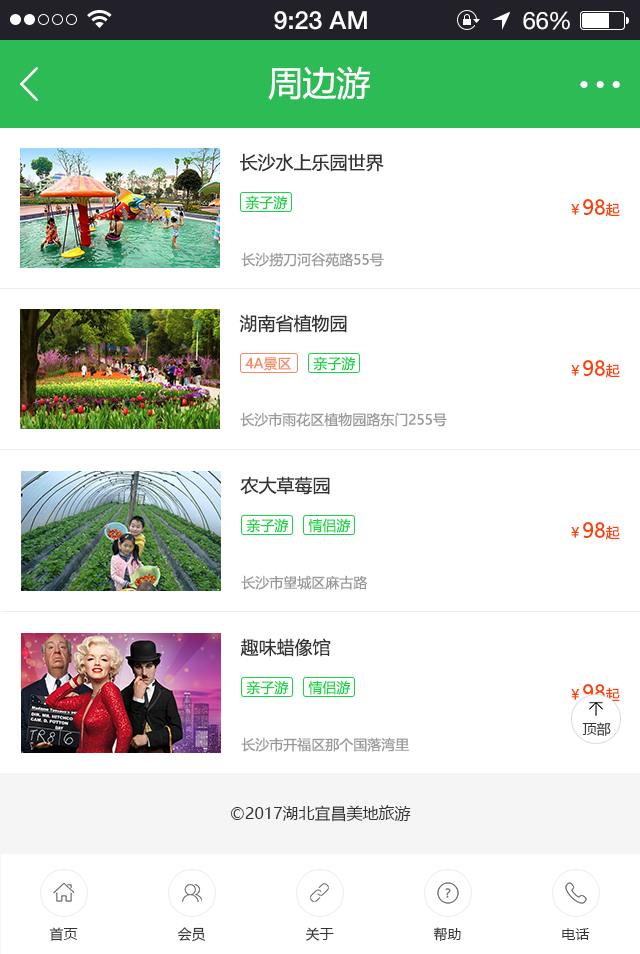
<style>
.page{position:relative;width:640px;height:954px;background:#ffffff}
.page>*{position:absolute;margin:0}
.t1{font:25px "HelveticaNeue-Medium";color:#ffffff}
.t2{font:24px "HelveticaNeue";color:#ffffff}
.t3{font:24px "HelveticaNeue";letter-spacing:-0.02em;color:#ffffff}
.t4{font:34px "MicrosoftYaHei";color:#ffffff}
.t5{font:18px "MicrosoftYaHei";color:#333333}
.t6{font:14px "MicrosoftYaHei";color:#19d349}
.t7{font:20px "MicrosoftYaHei";color:#f94307}
.t8{font:14px "MicrosoftYaHei";color:#f94307}
.t9{font:14px "MicrosoftYaHei";color:#999999}
.t10{font:14px "MicrosoftYaHei";color:#fb8963}
.t11{font:14px "MicrosoftYaHei";color:#333333}
.t12{font:16px "MicrosoftYaHei";color:#333333}
</style>
<div class="page">
<p class="t1" style="left:274px;top:11px;width:93px;height:19px">9:23 AM</p>
<p class="t2" style="left:523px;top:11px;width:47px;height:19px">6<span class="t3">6</span>%</p>
<p class="t4" style="left:268px;top:66px;width:102px;height:34px">周边游</p>
<p class="t5" style="left:240px;top:153px;width:144px;height:19px">长沙水上乐园世界</p>
<p class="t6" style="left:245px;top:195px;width:43px;height:15px">亲子游</p>
<p class="t7" style="left:571px;top:199px;width:49px;height:18px"><span class="t8">￥</span>98<span class="t8">起</span></p>
<p class="t9" style="left:241px;top:252px;width:143px;height:15px">长沙捞刀河谷苑路55号</p>
<p class="t5" style="left:239px;top:314px;width:108px;height:19px">湖南省植物园</p>
<p class="t10" style="left:245px;top:357px;width:46px;height:14px">4A景区</p>
<p class="t6" style="left:313px;top:356px;width:43px;height:15px">亲子游</p>
<p class="t7" style="left:571px;top:360px;width:49px;height:18px"><span class="t8">￥</span>98<span class="t8">起</span></p>
<p class="t9" style="left:240px;top:412px;width:207px;height:15px">长沙市雨花区植物园路东门255号</p>
<p class="t5" style="left:240px;top:476px;width:90px;height:19px">农大草莓园</p>
<p class="t6" style="left:246px;top:518px;width:43px;height:15px">亲子游</p>
<p class="t6" style="left:308px;top:518px;width:43px;height:15px">情侣游</p>
<p class="t7" style="left:571px;top:522px;width:49px;height:18px"><span class="t8">￥</span>98<span class="t8">起</span></p>
<p class="t9" style="left:241px;top:575px;width:127px;height:15px">长沙市望城区麻古路</p>
<p class="t5" style="left:240px;top:638px;width:91px;height:19px">趣味蜡像馆</p>
<p class="t6" style="left:246px;top:680px;width:43px;height:15px">亲子游</p>
<p class="t6" style="left:308px;top:680px;width:43px;height:15px">情侣游</p>
<p class="t7" style="left:571px;top:684px;width:49px;height:18px"><span class="t8">￥</span>98<span class="t8">起</span></p>
<p class="t11" style="left:582px;top:722px;width:29px;height:14px">顶部</p>
<p class="t9" style="left:241px;top:737px;width:169px;height:15px">长沙市开福区那个国落湾里</p>
<p class="t12" style="left:231px;top:805px;width:180px;height:17px">©2017湖北宜昌美地旅游</p>
<p class="t11" style="left:49px;top:927px;width:29px;height:14px">首页</p>
<p class="t11" style="left:178px;top:927px;width:27px;height:15px">会员</p>
<p class="t11" style="left:306px;top:927px;width:28px;height:14px">关于</p>
<p class="t11" style="left:433px;top:927px;width:28px;height:15px">帮助</p>
<p class="t11" style="left:562px;top:928px;width:28px;height:12px">电话</p>
</div>
